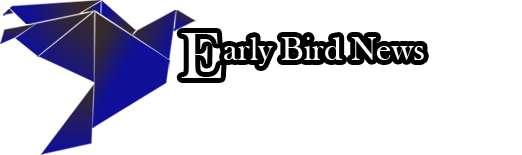
<style>
.page{position:relative;width:522px;height:155px;background:#ffffff}
.page>*{position:absolute;margin:0}
.t1{font:66.7px "BaskOldFace";color:#fcfcfc}
.t2{font:34.1px "BaskOldFace";color:#fcfcfc}
</style>
<div class="page">
<p class="t1" style="left:181px;top:33px;width:41px;height:45px">E</p>
<p class="t2" style="left:224px;top:37px;width:200px;height:29px">arly Bird News</p>
</div>
